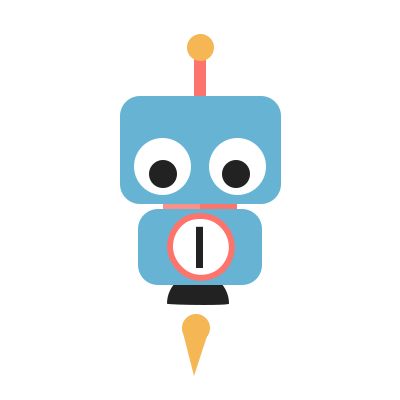
<style>
.page{position:relative;width:400px;height:400px;background:#ffffff}
.page>*{position:absolute;margin:0}
.t1{font:60px "KGWhattheTeacherWants";color:#222222}
</style>
<div class="page">
<p class="t1" style="left:196px;top:226px;width:7px;height:42px">1</p>
</div>
